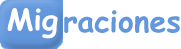
<style>
.page{position:relative;width:181px;height:49px;background:#ffffff}
.page>*{position:absolute;margin:0}
.t1{font:29.6px "ComicSansMS-Bold";color:#ffffff}
.t2{font:30px "ComicSansMS-Bold";color:#6297de}
</style>
<div class="page">
<p class="t1" style="left:7px;top:8px;width:51px;height:31px">Mig</p>
<p class="t2" style="left:64px;top:10px;width:116px;height:23px">raciones</p>
</div>
